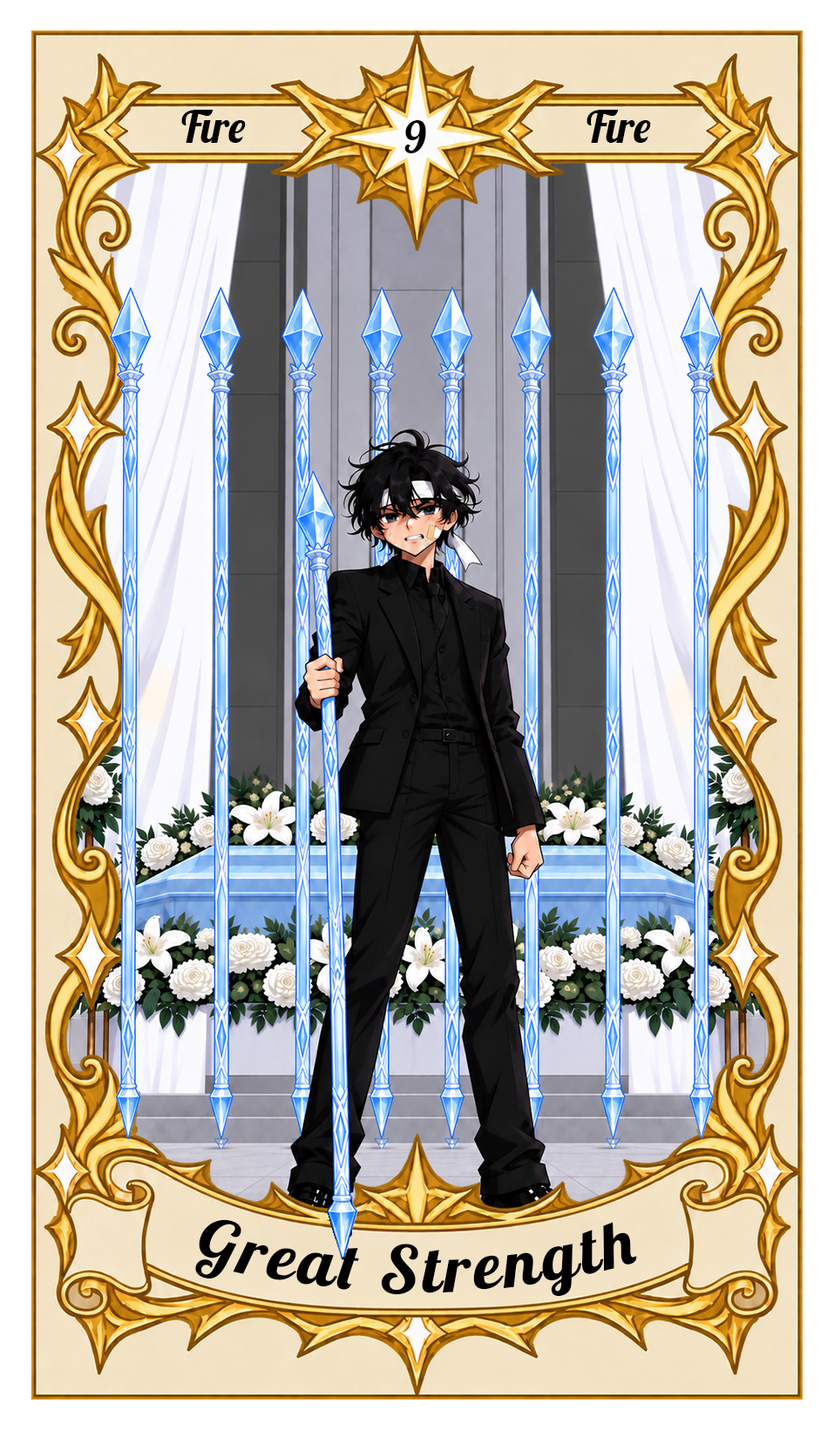
<style>
.page{position:relative;width:834px;height:1430px}
.page>*{position:absolute;margin:0}
.t1{font:43.6px "Lobster-Regular";color:#000000}
.t2{font:65.3px "Lobster-Regular";letter-spacing:0.05em;color:#000000}
</style>
<div class="page">
<p class="t1" style="left:181px;top:110px;width:65px;height:33px">Fire</p>
<p class="t1" style="left:586px;top:110px;width:65px;height:33px">Fire</p>
<p class="t1" style="left:404px;top:120px;width:22px;height:33px">9</p>
<p class="t2" style="left:195px;top:1220px;width:442px;height:77px">Great Strength</p>
</div>
